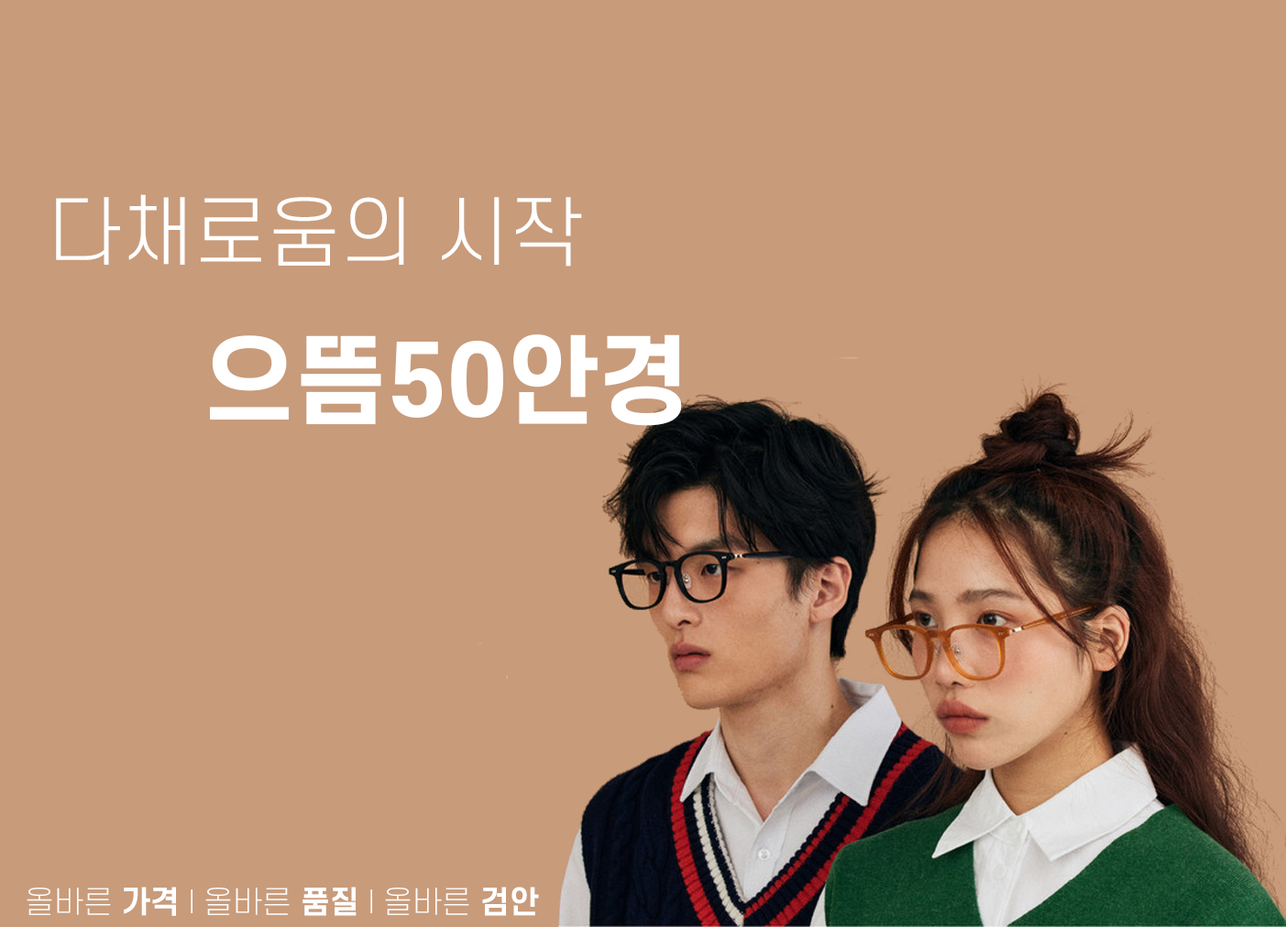
<style>
.page{position:relative;width:1286px;height:927px;background:#c89b7a}
.page>*{position:absolute;margin:0}
.t1{font:76.4px "S-CoreDream-3Light";color:#ffffff}
.t2{font:95.5px "S-CoreDream-7ExtraBold";color:#ffffff}
.t3{font:30.5px "S-CoreDream-2ExtraLight";color:#ffffff}
.t4{font:30.5px "S-CoreDream-6Bold";color:#ffffff}
</style>
<div class="page">
<p class="t1" style="left:56px;top:194px;width:526px;height:73px">다채로움의 시작</p>
<p class="t2" style="left:210px;top:334px;width:472px;height:92px">으뜸50안경</p>
<p class="t3" style="left:27px;top:887px;width:512px;height:29px">올바른 <span class="t4">가격</span> l 올바른 <span class="t4">품질</span> l 올바른 <span class="t4">검안</span></p>
</div>
